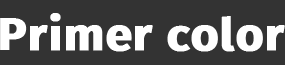
<style>
.page{position:relative;width:285px;height:65px;background:#333333}
.page>*{position:absolute;margin:0}
.t1{font:45.6px "FiraSans-Bold";color:#ffffff;font-weight:bold;scale:1.05 1}
</style>
<div class="page">
<p class="t1" style="left:0px;top:13px;width:285px;height:39px">Primer color</p>
</div>
